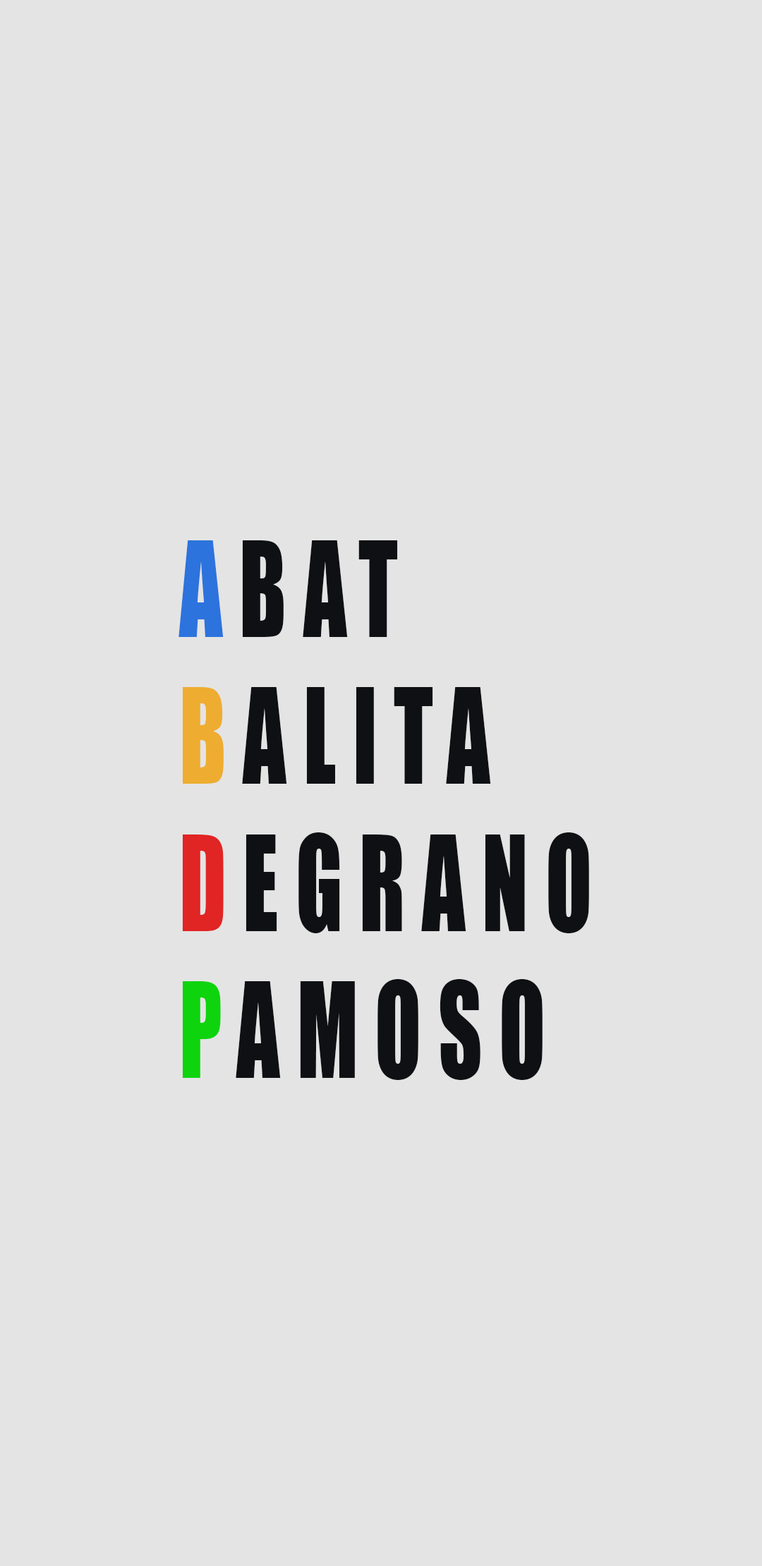
<style>
.page{position:relative;width:762px;height:1566px;background:#e4e4e4}
.page>*{position:absolute;margin:0}
.t1{font:122.3px "Impact";letter-spacing:0.2em;color:#0e1013;scale:0.69 1}
.t2{font:122.3px "Impact";letter-spacing:0.2em;color:#2c73dd;scale:0.69 1}
.t3{font:122.3px "Impact";letter-spacing:0.2em;color:#eead30;scale:0.69 1}
.t4{font:122.3px "Impact";letter-spacing:0.2em;color:#e12424;scale:0.69 1}
.t5{font:122.3px "Impact";letter-spacing:0.2em;color:#0ed40e;scale:0.69 1}
</style>
<div class="page">
<p class="t1" style="left:178px;top:540px;width:411px;height:540px"><span class="t2">A</span>BAT<br><span class="t3">B</span>ALITA<br><span class="t4">D</span>EGRANO<br><span class="t5">P</span>AMOSO</p>
</div>
